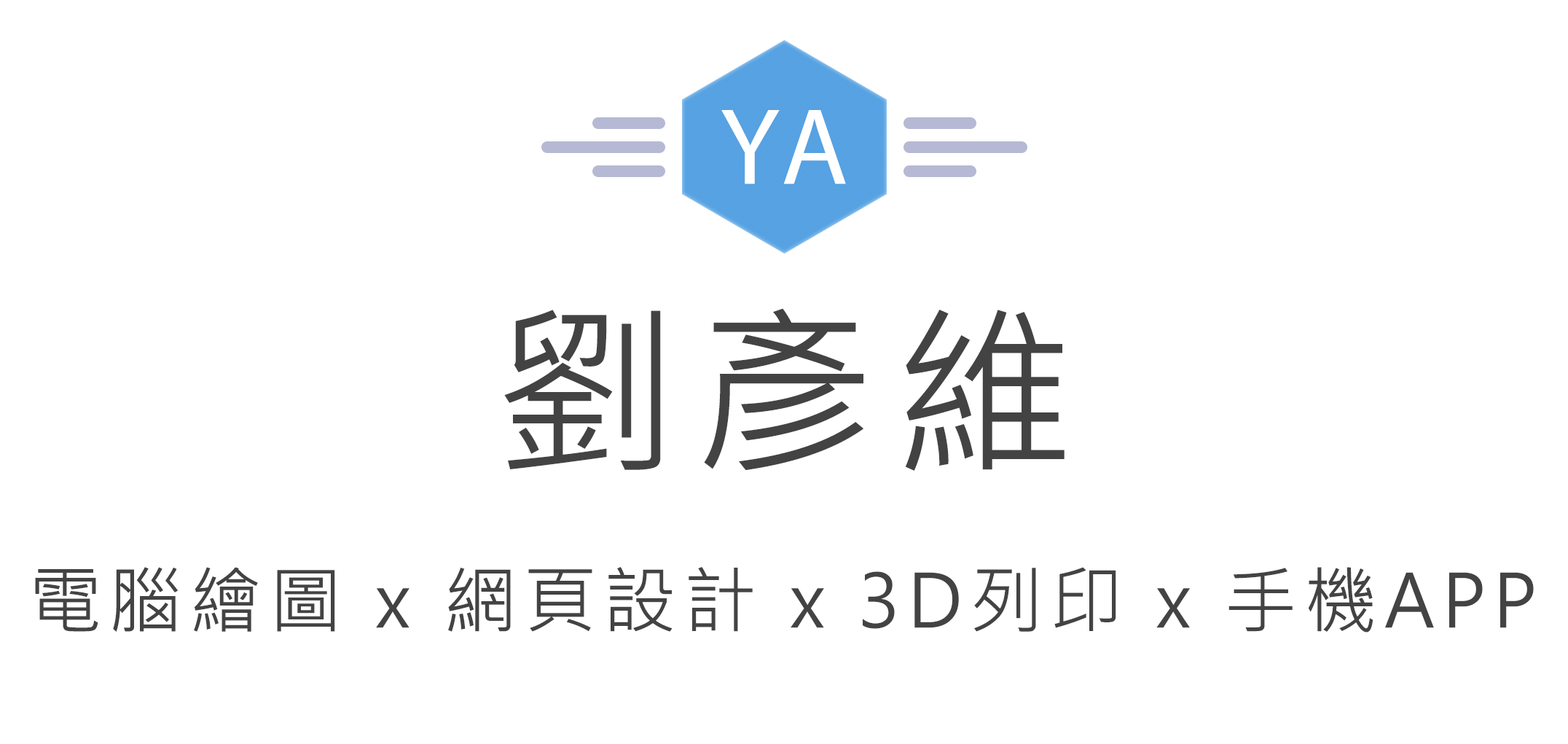
<style>
.page{position:relative;width:1568px;height:744px;background:#ffffff}
.page>*{position:absolute;margin:0}
.t1{font:109.3px "MyriadPro-Regular";letter-spacing:0.1em;color:#ffffff}
.t2{font:182.2px "MicrosoftJhengHeiRegular";letter-spacing:0.1em;color:#434343}
.t3{font:72.9px "MicrosoftJhengHeiRegular";letter-spacing:0.1em;color:#434343}
</style>
<div class="page">
<p class="t1" style="left:721px;top:110px;width:125px;height:74px">YA</p>
<p class="t2" style="left:504px;top:308px;width:561px;height:163px">劉彥維</p>
<p class="t3" style="left:35px;top:567px;width:1499px;height:65px">電腦繪圖 x 網頁設計 x 3D列印 x 手機APP</p>
</div>
